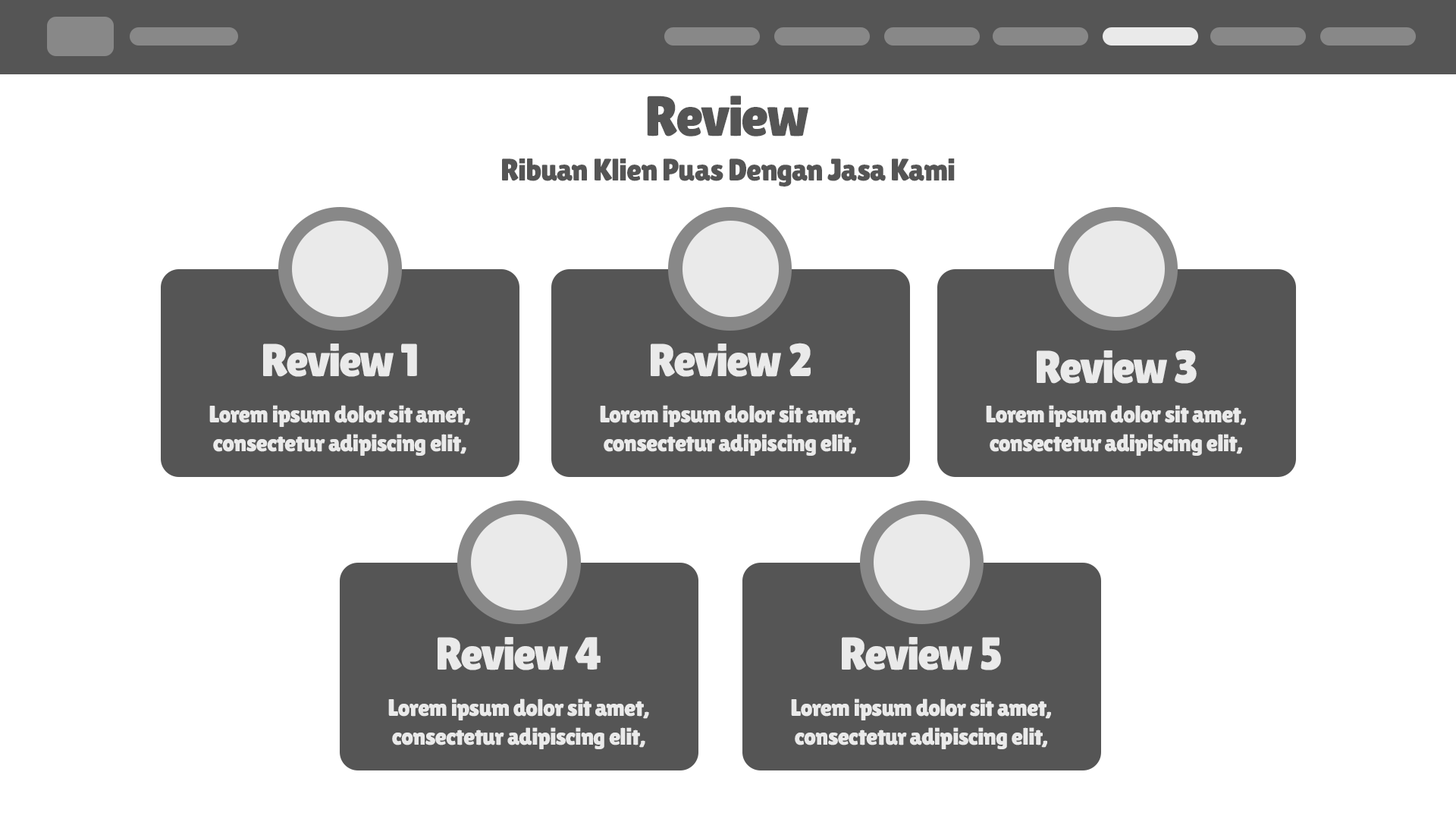
<style>
.page{position:relative;width:1456px;height:819px;background:#ffffff}
.page>*{position:absolute;margin:0}
.t1{font:56.5px "LilitaOne";letter-spacing:-0.025em;color:#555555}
.t2{font:31.2px "LilitaOne";letter-spacing:-0.025em;color:#555555}
.t3{font:46px "LilitaOne";letter-spacing:-0.025em;color:#eaeaea}
.t4{font:23.9px "LilitaOne";letter-spacing:-0.025em;color:#eaeaea}
</style>
<div class="page">
<p class="t1" style="left:647px;top:96px;width:162px;height:40px">Review</p>
<p class="t2" style="left:502px;top:158px;width:453px;height:29px">Ribuan Klien Puas Dengan Jasa Kami</p>
<p class="t3" style="left:263px;top:344px;width:154px;height:33px">Review 1</p>
<p class="t3" style="left:651px;top:343px;width:160px;height:34px">Review 2</p>
<p class="t3" style="left:1037px;top:350px;width:160px;height:34px">Review 3</p>
<p class="t4" style="left:209px;top:405px;width:261px;height:51px;text-align:center">Lorem ipsum dolor sit amet,<br>consectetur adipiscing elit,</p>
<p class="t4" style="left:600px;top:405px;width:260px;height:51px;text-align:center">Lorem ipsum dolor sit amet,<br>consectetur adipiscing elit,</p>
<p class="t4" style="left:986px;top:405px;width:260px;height:51px;text-align:center">Lorem ipsum dolor sit amet,<br>consectetur adipiscing elit,</p>
<p class="t3" style="left:438px;top:637px;width:163px;height:33px">Review 4</p>
<p class="t3" style="left:842px;top:637px;width:159px;height:33px">Review 5</p>
<p class="t4" style="left:388px;top:698px;width:261px;height:51px;text-align:center">Lorem ipsum dolor sit amet,<br>consectetur adipiscing elit,</p>
<p class="t4" style="left:791px;top:698px;width:260px;height:51px;text-align:center">Lorem ipsum dolor sit amet,<br>consectetur adipiscing elit,</p>
</div>
